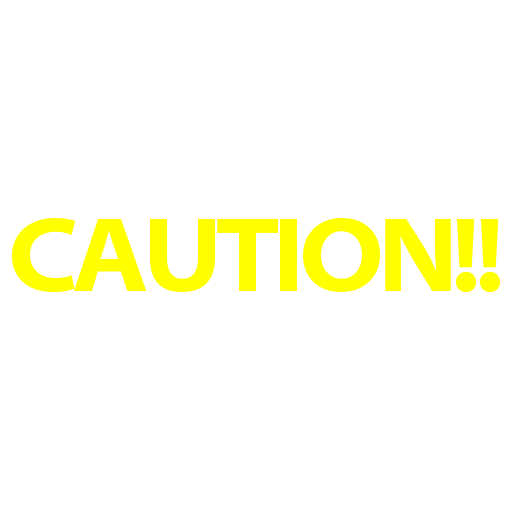
<style>
.page{position:relative;width:512px;height:512px;background:#ffffff}
.page>*{position:absolute;margin:0}
.t1{font:106.9px "MyriadPro-BoldSemiExt";letter-spacing:-0.06em;color:#ffff00}
</style>
<div class="page">
<p class="t1" style="left:12px;top:218px;width:488px;height:75px">CAUTION!!</p>
</div>
